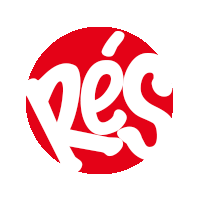
<style>
.page{position:relative;width:200px;height:200px;background:#ffffff}
.page>*{position:absolute;margin:0}
.t1{font:12px "MarkerFelt-Thin";color:#ffffff}
.t2{font:127px "MarkerFelt-Thin";color:#ffffff}
</style>
<div class="page">
<p class="t1" style="left:80px;top:31px;width:47px;height:104px">é</p>
<p class="t1" style="left:117px;top:53px;width:59px;height:108px">S</p>
<p class="t2" style="left:21px;top:63px;width:103px;height:111px;rotate:-23deg">R</p>
</div>
